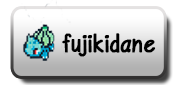
<style>
.page{position:relative;width:180px;height:85px;background:#ffffff}
.page>*{position:absolute;margin:0}
.t1{font:32.6px "WRTishKid";letter-spacing:-0.025em;color:#000000;font-weight:bold}
</style>
<div class="page">
<p class="t1" style="left:62px;top:33px;width:94px;height:24px">fujikidane</p>
</div>
